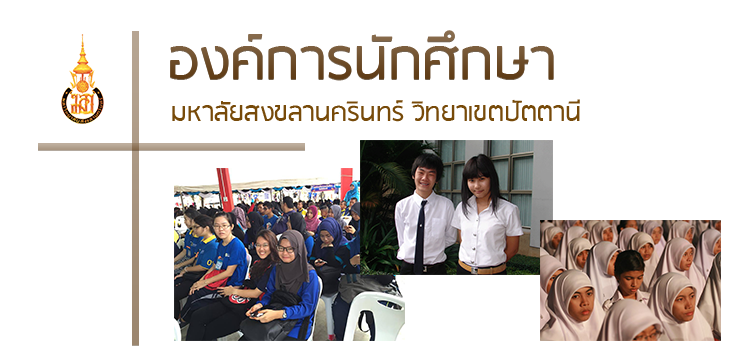
<style>
.page{position:relative;width:750px;height:360px;background:#ffffff}
.page>*{position:absolute;margin:0}
.t1{font:65.2px "RSU";color:#6e4e2a}
.t2{font:29.9px "RSU";color:#774a09}
</style>
<div class="page">
<p class="t1" style="left:170px;top:30px;width:384px;height:50px">องค์การนักศึกษา</p>
<p class="t2" style="left:172px;top:99px;width:408px;height:23px">มหาลัยสงขลานครินทร์ วิทยาเขตปัตตานี</p>
</div>
